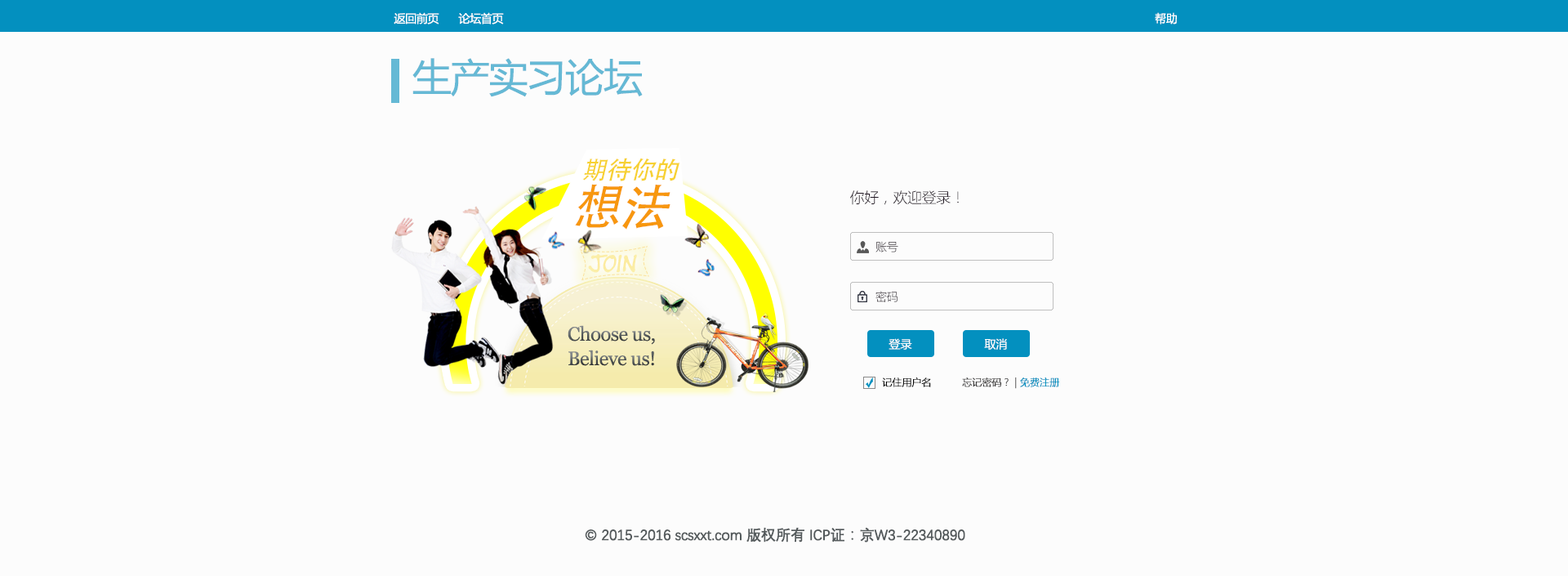
<style>
.page{position:relative;width:1568px;height:576px;background:#fcfcfc}
.page>*{position:absolute;margin:0}
.t1{font:11.4px "MicrosoftYaHei";letter-spacing:-0.025em;color:#ffffff}
.t2{font:39.2px "MicrosoftYaHei";letter-spacing:-0.025em;color:#65b9d5}
.t3{font:25.1px/25.1px "AdobeHeitiStd-Regular";letter-spacing:-0.02em;color:#f7d132;text-transform:uppercase}
.t4{font:20.1px/25.1px "AdobeHeitiStd-Regular";letter-spacing:-0.02em;color:#191919;text-transform:uppercase}
.t5{font:50.3px/25.1px "AdobeHeitiStd-Regular";letter-spacing:-0.02em;color:#f7970f;text-transform:uppercase}
.t6{font:14.7px "MicrosoftYaHeiLight";letter-spacing:-0.02em;color:#211723;text-transform:uppercase}
.t7{font:11.4px "MicrosoftYaHeiLight";letter-spacing:-0.02em;text-transform:uppercase}
.t8{font:29.5px "BuxtonSketch";letter-spacing:-0.02em;color:#fcea9c;text-transform:uppercase}
.t9{font:11.4px "MicrosoftYaHeiLight";letter-spacing:-0.02em;color:#211723;text-transform:uppercase}
.t10{font:19.6px/24.5px "Georgia";letter-spacing:-0.025em;color:#545a5c}
.t11{font:11.4px "MicrosoftYaHeiLight";letter-spacing:-0.02em;color:#ffffff;text-transform:uppercase;font-weight:bold}
.t12{font:9.8px "MicrosoftYaHeiLight";letter-spacing:-0.02em;color:#0c0c0c;text-transform:uppercase;font-weight:bold}
.t13{font:9.8px "MicrosoftYaHeiLight";letter-spacing:-0.02em;color:#3b3a3a;text-transform:uppercase;font-weight:bold}
.t14{font:9.8px "MicrosoftYaHeiLight";letter-spacing:-0.02em;color:#0390bf;text-transform:uppercase;font-weight:bold}
.t15{font:14.7px "DengXian-Regular";letter-spacing:-0.025em;color:#545a5c;font-weight:bold}
</style>
<div class="page">
<p class="t1" style="left:394px;top:12px;width:45px;height:12px">返回前页</p>
<p class="t1" style="left:458px;top:12px;width:46px;height:12px">论坛首页</p>
<p class="t1" style="left:1155px;top:12px;width:22px;height:12px">帮助</p>
<p class="t2" style="left:412px;top:58px;width:231px;height:39px">生产实习论坛</p>
<p class="t3" style="left:575px;top:158px;width:105px;height:71px"><span class="t4"><br></span>期待你的<br><span class="t5">想法</span></p>
<p class="t6" style="left:850px;top:190px;width:109px;height:15px">你好，欢迎登录！</p>
<p class="t7" style="left:875px;top:241px;width:23px;height:11px">账号</p>
<p class="t8" style="left:588px;top:254px;width:49px;height:19px;rotate:-1deg">JOIN</p>
<p class="t9" style="left:875px;top:291px;width:23px;height:11px">密码</p>
<p class="t10" style="left:568px;top:325px;width:87px;height:41px;text-align:center">Choose us,<br>Believe us!</p>
<p class="t11" style="left:889px;top:338px;width:23px;height:12px">登录</p>
<p class="t11" style="left:984px;top:338px;width:23px;height:12px">取消</p>
<p class="t12" style="left:882px;top:377px;width:49px;height:10px">记住用户名</p>
<p class="t13" style="left:962px;top:377px;width:98px;height:12px">忘记密码？ | <span class="t14">免费注册</span></p>
<p class="t15" style="left:585px;top:527px;width:380px;height:15px">© 2015-2016 scsxxt.com 版权所有 ICP证：京W3-22340890</p>
</div>
